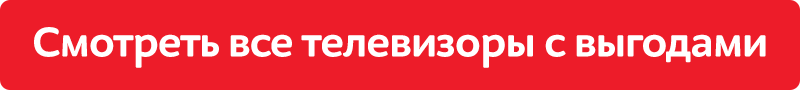
<style>
.page{position:relative;width:800px;height:90px;background:#ed1c29}
.page>*{position:absolute;margin:0}
.t1{font:44px "M.Video-Bold";letter-spacing:-0.02em;color:#ffffff}
</style>
<div class="page">
<p class="t1" style="left:34px;top:27px;width:732px;height:41px">Смотреть все телевизоры с выгодами</p>
</div>
